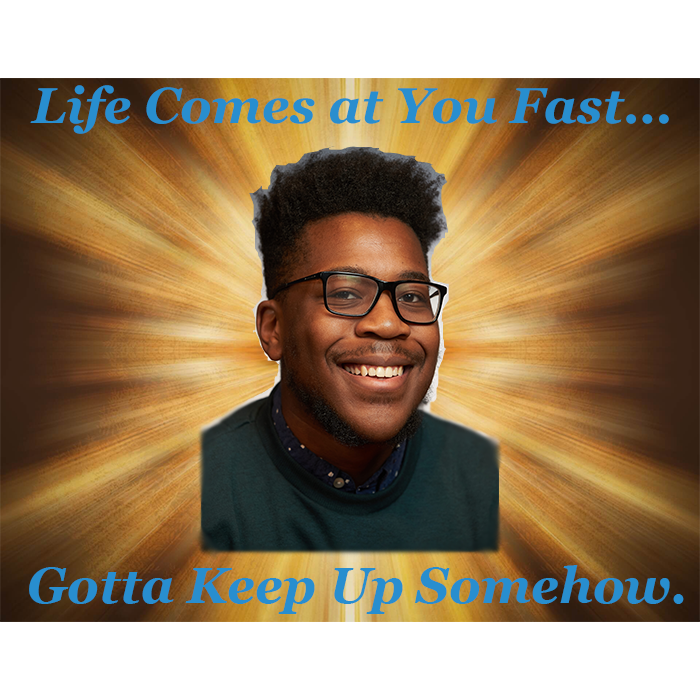
<style>
.page{position:relative;width:700px;height:700px;background:#ffffff}
.page>*{position:absolute;margin:0}
.t1{font:12px "Georgia-BoldItalic";color:#288ecf}
</style>
<div class="page">
<p class="t1" style="left:30px;top:85px;width:639px;height:49px">Life Comes at You Fast...</p>
<p class="t1" style="left:29px;top:565px;width:655px;height:49px">Gotta Keep Up Somehow.</p>
</div>
